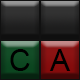
<style>
.page{position:relative;width:80px;height:80px}
.page>*{position:absolute;margin:0}
.t1{font:30px "ArialMT";color:#000000}
</style>
<div class="page">
<p class="t1" style="left:10px;top:49px;width:20px;height:22px">C</p>
<p class="t1" style="left:49px;top:49px;width:22px;height:22px">A</p>
</div>
